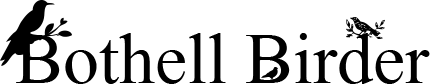
<style>
.page{position:relative;width:430px;height:84px;background:#ffffff}
.page>*{position:absolute;margin:0}
.t1{font:72px "MongolianBaiti";color:#000000}
</style>
<div class="page">
<p class="t1" style="left:16px;top:33px;width:414px;height:51px">Bothell Birder</p>
</div>
